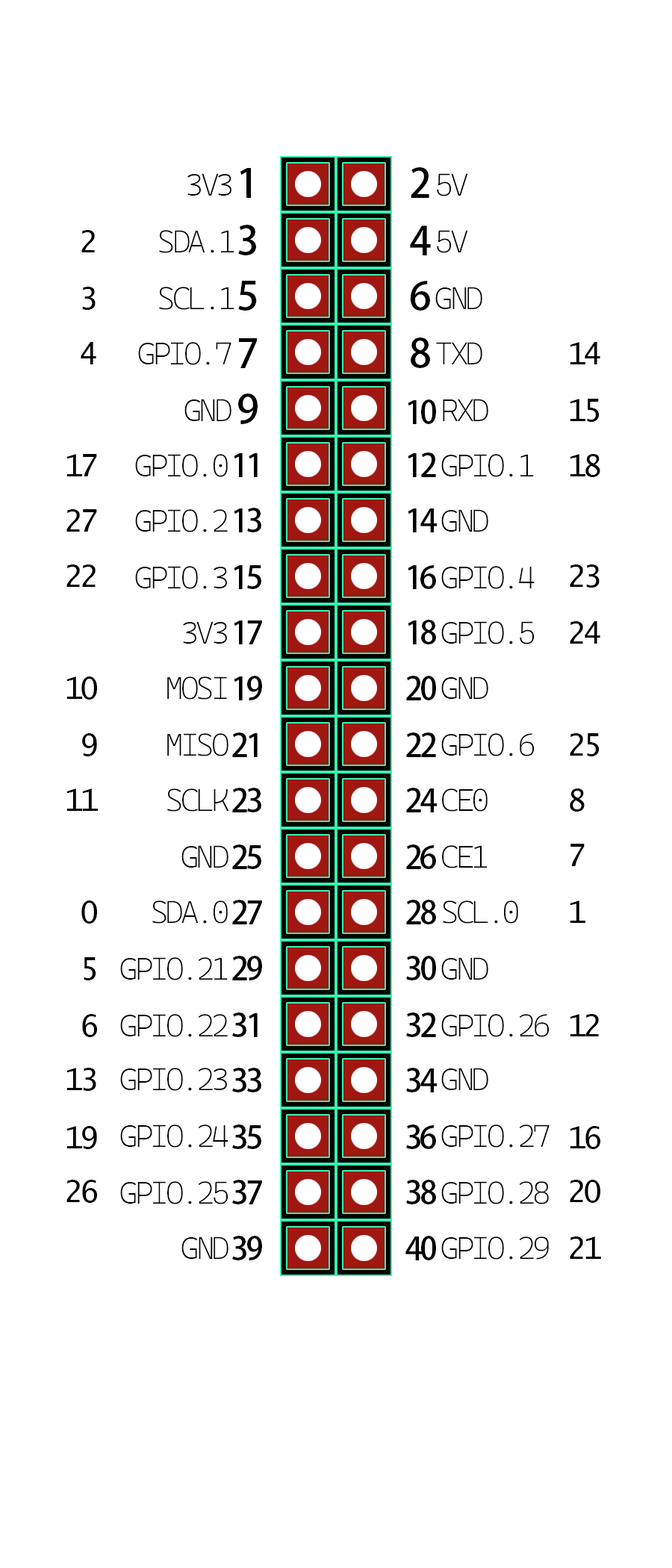
<style>
.page{position:relative;width:672px;height:1568px;background:#ffffff}
.page>*{position:absolute;margin:0}
.t1{font:31.6px "CascadiaMonoRoman-ExtraLight";letter-spacing:-0.1em;color:#000000}
.t2{font:39.5px "AdobeHeitiStd-Regular";color:#000000}
.t3{font:31.6px "LucidaConsole";letter-spacing:-0.1em;color:#000000}
.t4{font:31.6px "AdobeHeitiStd-Regular";letter-spacing:-0.1em;color:#000000}
</style>
<div class="page">
<p class="t1" style="left:187px;top:173px;width:44px;height:23px">3V3</p>
<p class="t2" style="left:240px;top:168px;width:11px;height:30px">1</p>
<p class="t2" style="left:411px;top:167px;width:18px;height:31px">2</p>
<p class="t1" style="left:437px;top:173px;width:31px;height:23px">5V</p>
<p class="t3" style="left:81px;top:230px;width:14px;height:22px">2</p>
<p class="t1" style="left:159px;top:230px;width:75px;height:23px">SDA.1</p>
<p class="t2" style="left:238px;top:225px;width:18px;height:30px">3</p>
<p class="t2" style="left:410px;top:225px;width:21px;height:30px">4</p>
<p class="t1" style="left:437px;top:230px;width:31px;height:23px">5V</p>
<p class="t2" style="left:238px;top:281px;width:19px;height:30px">5</p>
<p class="t2" style="left:410px;top:281px;width:20px;height:30px">6</p>
<p class="t3" style="left:82px;top:287px;width:14px;height:23px">3</p>
<p class="t1" style="left:159px;top:287px;width:75px;height:23px">SCL.1</p>
<p class="t1" style="left:435px;top:287px;width:47px;height:22px">GND</p>
<p class="t3" style="left:81px;top:342px;width:15px;height:22px">4</p>
<p class="t1" style="left:138px;top:342px;width:93px;height:23px">GPIO.7</p>
<p class="t2" style="left:239px;top:338px;width:18px;height:30px">7</p>
<p class="t2" style="left:411px;top:337px;width:19px;height:31px">8</p>
<p class="t1" style="left:436px;top:342px;width:46px;height:22px">TXD</p>
<p class="t3" style="left:570px;top:342px;width:30px;height:22px">14</p>
<p class="t1" style="left:184px;top:399px;width:47px;height:22px">GND</p>
<p class="t2" style="left:238px;top:393px;width:20px;height:31px">9</p>
<p class="t4" style="left:408px;top:399px;width:28px;height:25px">10</p>
<p class="t1" style="left:443px;top:399px;width:45px;height:22px">RXD</p>
<p class="t3" style="left:570px;top:399px;width:30px;height:23px">15</p>
<p class="t3" style="left:66px;top:454px;width:31px;height:22px">17</p>
<p class="t1" style="left:135px;top:454px;width:93px;height:23px">GPIO.0</p>
<p class="t4" style="left:234px;top:453px;width:24px;height:24px">11</p>
<p class="t4" style="left:408px;top:452px;width:28px;height:25px">12</p>
<p class="t1" style="left:441px;top:454px;width:93px;height:23px">GPIO.1</p>
<p class="t3" style="left:570px;top:454px;width:30px;height:23px">18</p>
<p class="t3" style="left:66px;top:509px;width:31px;height:23px">27</p>
<p class="t1" style="left:135px;top:509px;width:93px;height:23px">GPIO.2</p>
<p class="t4" style="left:234px;top:508px;width:27px;height:24px">13</p>
<p class="t4" style="left:408px;top:508px;width:29px;height:24px">14</p>
<p class="t1" style="left:441px;top:509px;width:47px;height:23px">GND</p>
<p class="t3" style="left:66px;top:564px;width:30px;height:23px">22</p>
<p class="t1" style="left:135px;top:566px;width:92px;height:23px">GPIO.3</p>
<p class="t4" style="left:234px;top:565px;width:27px;height:24px">15</p>
<p class="t4" style="left:408px;top:565px;width:28px;height:24px">16</p>
<p class="t1" style="left:441px;top:566px;width:94px;height:23px">GPIO.4</p>
<p class="t3" style="left:570px;top:564px;width:30px;height:24px">23</p>
<p class="t1" style="left:183px;top:621px;width:44px;height:23px">3V3</p>
<p class="t4" style="left:234px;top:620px;width:28px;height:24px">17</p>
<p class="t4" style="left:408px;top:620px;width:28px;height:24px">18</p>
<p class="t1" style="left:441px;top:621px;width:93px;height:23px">GPIO.5</p>
<p class="t3" style="left:570px;top:621px;width:30px;height:23px">24</p>
<p class="t3" style="left:66px;top:676px;width:31px;height:24px">10</p>
<p class="t1" style="left:167px;top:676px;width:60px;height:24px">MOSI</p>
<p class="t4" style="left:234px;top:676px;width:28px;height:24px">19</p>
<p class="t4" style="left:406px;top:676px;width:30px;height:24px">20</p>
<p class="t1" style="left:441px;top:676px;width:47px;height:23px">GND</p>
<p class="t3" style="left:82px;top:733px;width:15px;height:23px">9</p>
<p class="t1" style="left:167px;top:733px;width:61px;height:23px">MISO</p>
<p class="t4" style="left:232px;top:732px;width:26px;height:25px">21</p>
<p class="t4" style="left:406px;top:732px;width:30px;height:25px">22</p>
<p class="t1" style="left:441px;top:733px;width:93px;height:23px">GPIO.6</p>
<p class="t3" style="left:570px;top:733px;width:30px;height:23px">25</p>
<p class="t3" style="left:66px;top:788px;width:32px;height:23px">11</p>
<p class="t1" style="left:167px;top:788px;width:62px;height:24px">SCLK</p>
<p class="t4" style="left:232px;top:788px;width:29px;height:24px">23</p>
<p class="t4" style="left:406px;top:788px;width:31px;height:24px">24</p>
<p class="t1" style="left:442px;top:788px;width:46px;height:24px">CE0</p>
<p class="t3" style="left:570px;top:788px;width:15px;height:24px">8</p>
<p class="t1" style="left:181px;top:845px;width:47px;height:23px">GND</p>
<p class="t4" style="left:232px;top:844px;width:29px;height:25px">25</p>
<p class="t4" style="left:406px;top:844px;width:30px;height:25px">26</p>
<p class="t1" style="left:442px;top:845px;width:46px;height:23px">CE1</p>
<p class="t3" style="left:570px;top:844px;width:15px;height:22px">7</p>
<p class="t3" style="left:81px;top:900px;width:16px;height:24px">0</p>
<p class="t1" style="left:152px;top:900px;width:76px;height:24px">SDA.0</p>
<p class="t4" style="left:232px;top:900px;width:30px;height:24px">27</p>
<p class="t4" style="left:406px;top:900px;width:30px;height:24px">28</p>
<p class="t1" style="left:443px;top:900px;width:75px;height:24px">SCL.0</p>
<p class="t3" style="left:570px;top:900px;width:15px;height:23px">1</p>
<p class="t3" style="left:84px;top:957px;width:12px;height:23px">5</p>
<p class="t1" style="left:120px;top:957px;width:108px;height:23px">GPIO.21</p>
<p class="t4" style="left:232px;top:956px;width:30px;height:24px">29</p>
<p class="t4" style="left:406px;top:956px;width:30px;height:24px">30</p>
<p class="t1" style="left:441px;top:957px;width:47px;height:23px">GND</p>
<p class="t3" style="left:82px;top:1014px;width:15px;height:23px">6</p>
<p class="t1" style="left:120px;top:1014px;width:108px;height:23px">GPIO.22</p>
<p class="t4" style="left:232px;top:1012px;width:26px;height:25px">31</p>
<p class="t4" style="left:406px;top:1012px;width:30px;height:25px">32</p>
<p class="t1" style="left:441px;top:1014px;width:108px;height:23px">GPIO.26</p>
<p class="t3" style="left:570px;top:1014px;width:29px;height:22px">12</p>
<p class="t3" style="left:66px;top:1068px;width:30px;height:23px">13</p>
<p class="t1" style="left:120px;top:1068px;width:107px;height:23px">GPIO.23</p>
<p class="t4" style="left:232px;top:1068px;width:29px;height:24px">33</p>
<p class="t4" style="left:406px;top:1068px;width:31px;height:24px">34</p>
<p class="t1" style="left:441px;top:1068px;width:47px;height:22px">GND</p>
<p class="t3" style="left:66px;top:1126px;width:31px;height:23px">19</p>
<p class="t1" style="left:120px;top:1124px;width:108px;height:24px">GPIO.24</p>
<p class="t4" style="left:232px;top:1124px;width:29px;height:25px">35</p>
<p class="t4" style="left:406px;top:1124px;width:30px;height:25px">36</p>
<p class="t1" style="left:441px;top:1124px;width:109px;height:24px">GPIO.27</p>
<p class="t3" style="left:570px;top:1126px;width:30px;height:23px">16</p>
<p class="t3" style="left:66px;top:1180px;width:31px;height:23px">26</p>
<p class="t1" style="left:120px;top:1181px;width:108px;height:23px">GPIO.25</p>
<p class="t4" style="left:232px;top:1180px;width:30px;height:24px">37</p>
<p class="t4" style="left:406px;top:1180px;width:30px;height:24px">38</p>
<p class="t1" style="left:441px;top:1181px;width:108px;height:23px">GPIO.28</p>
<p class="t3" style="left:570px;top:1180px;width:30px;height:23px">20</p>
<p class="t1" style="left:181px;top:1236px;width:47px;height:23px">GND</p>
<p class="t4" style="left:232px;top:1236px;width:30px;height:24px">39</p>
<p class="t4" style="left:405px;top:1236px;width:31px;height:24px">40</p>
<p class="t1" style="left:441px;top:1236px;width:108px;height:24px">GPIO.29</p>
<p class="t3" style="left:570px;top:1236px;width:31px;height:23px">21</p>
</div>
